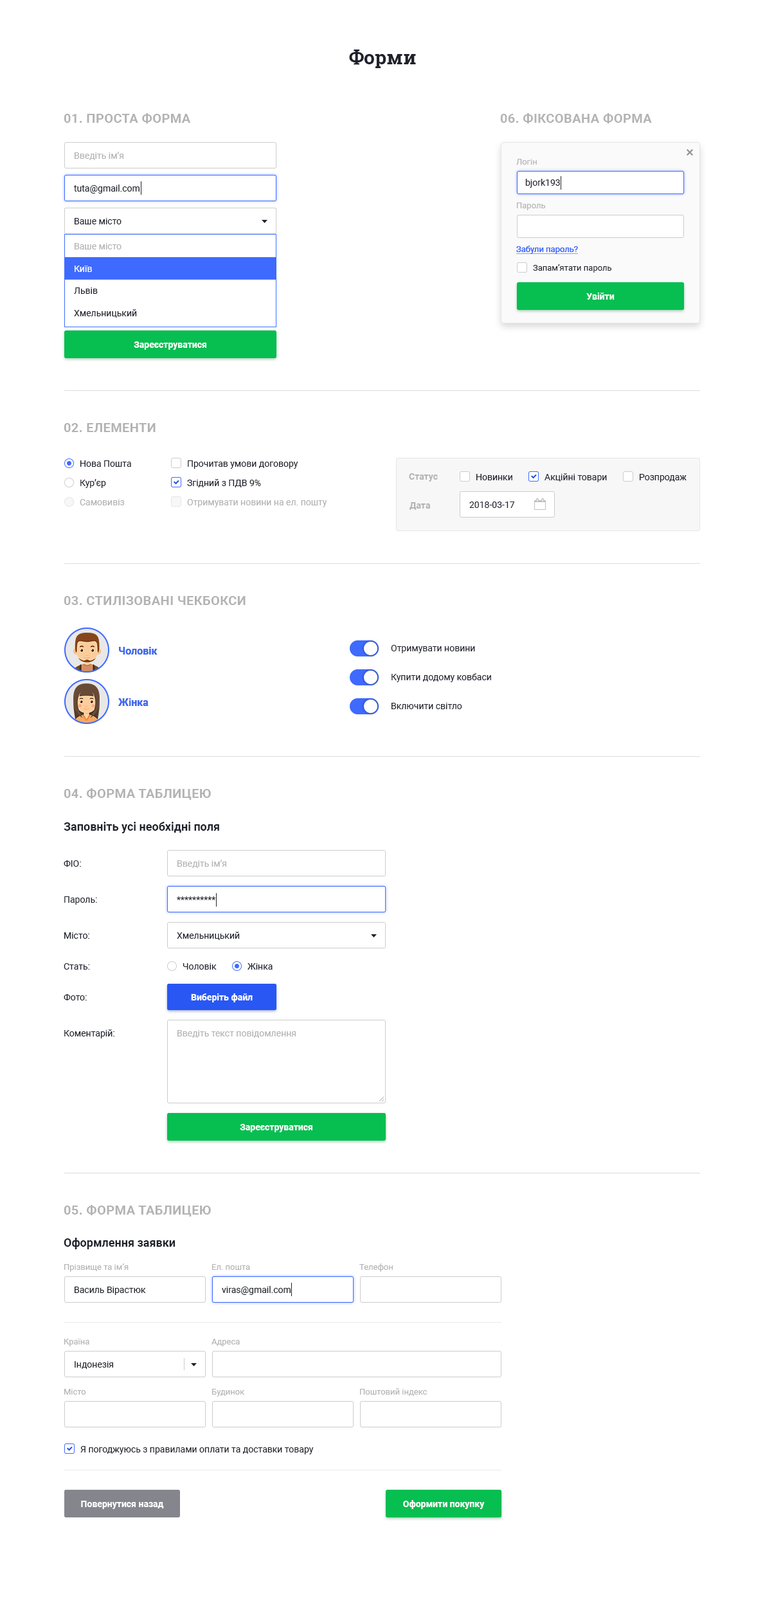
<style>
.page{position:relative;width:765px;height:1610px;background:#ffffff}
.page>*{position:absolute;margin:0}
.t1{font:19.3px "RobotoSlab-Bold";color:#1f222c}
.t2{font:12.9px "Roboto-Bold";letter-spacing:0.02em;color:#b3b3b3;text-transform:uppercase}
.t3{font:9px "Roboto-Regular";color:#b3b3b3}
.t4{font:8.4px "Roboto-Regular";color:#b3b3b3}
.t5{font:9px "Roboto-Regular";color:#1f222c}
.t6{font:9px "Roboto-Regular"}
.t7{font:8.4px "Roboto-Regular";color:#3e6aff}
.t8{font:8.4px "Roboto-Regular";color:#3e6aff;text-decoration:underline}
.t9{font:9px "Roboto-Regular";color:#ffffff}
.t10{font:8.4px "Roboto-Regular";color:#1f222c}
.t11{font:9px "Roboto-Bold";color:#ffffff}
.t12{font:9px "TimesNewRomanPSMT"}
.t13{font:9px "Roboto-Bold";color:#b3b3b3}
.t14{font:10.3px "Roboto-Bold";color:#3e6aff}
.t15{font:11.6px "Roboto-Bold";color:#1f222c}
</style>
<div class="page">
<p class="t1" style="left:349px;top:50px;width:67px;height:18px">Форми</p>
<p class="t2" style="left:64px;top:113px;width:127px;height:10px">01. проста форма</p>
<p class="t2" style="left:500px;top:113px;width:152px;height:10px">06. фіксована форма</p>
<p class="t3" style="left:75px;top:152px;width:48px;height:8px">Введіть ім’я</p>
<p class="t4" style="left:516px;top:159px;width:21px;height:6px">Логін</p>
<p class="t5" style="left:74px;top:184px;width:66px;height:10px">tuta@gmail.com</p>
<p class="t6" style="left:75px;top:184px;width:21px;height:8px">Email</p>
<p class="t5" style="left:525px;top:179px;width:35px;height:9px">bjork193</p>
<p class="t4" style="left:517px;top:203px;width:29px;height:7px">Пароль</p>
<p class="t5" style="left:75px;top:218px;width:47px;height:6px">Ваше місто</p>
<p class="t5" style="left:75px;top:218px;width:47px;height:6px">Ваше місто</p>
<p class="t3" style="left:75px;top:243px;width:47px;height:6px">Ваше місто</p>
<p class="t7" style="left:516px;top:246px;width:62px;height:8px">Забули пароль?</p>
<p class="t8" style="left:516px;top:246px;width:62px;height:8px">Забули пароль?</p>
<p class="t9" style="left:75px;top:266px;width:17px;height:6px">Київ</p>
<p class="t10" style="left:533px;top:264px;width:79px;height:9px">Запам’ятати пароль</p>
<p class="t5" style="left:74px;top:287px;width:24px;height:7px">Львів</p>
<p class="t11" style="left:586px;top:292px;width:29px;height:8px">Увійти</p>
<p class="t11" style="left:586px;top:292px;width:29px;height:8px">Увійти</p>
<p class="t5" style="left:74px;top:309px;width:63px;height:9px">Хмельницький</p>
<p class="t11" style="left:134px;top:341px;width:72px;height:9px">Зареєструватися</p>
<p class="t12" style="left:139px;top:341px;width:63px;height:9px">Зареєструватися</p>
<p class="t2" style="left:64px;top:423px;width:92px;height:9px">02. елементи</p>
<p class="t5" style="left:80px;top:460px;width:51px;height:7px">Нова Пошта</p>
<p class="t5" style="left:188px;top:460px;width:110px;height:9px">Прочитав умови договору</p>
<p class="t13" style="left:409px;top:473px;width:29px;height:9px">Статус</p>
<p class="t5" style="left:476px;top:474px;width:36px;height:6px">Новинки</p>
<p class="t5" style="left:544px;top:473px;width:63px;height:9px">Акційні товари</p>
<p class="t5" style="left:640px;top:474px;width:47px;height:8px">Розпродаж</p>
<p class="t5" style="left:80px;top:479px;width:26px;height:9px">Кур’єр</p>
<p class="t5" style="left:187px;top:479px;width:74px;height:8px">Згідний з ПДВ 9%</p>
<p class="t3" style="left:80px;top:499px;width:44px;height:6px">Самовивіз</p>
<p class="t3" style="left:187px;top:499px;width:140px;height:8px">Отримувати новини на ел. пошту</p>
<p class="t13" style="left:410px;top:502px;width:20px;height:8px">Дата</p>
<p class="t5" style="left:469px;top:501px;width:46px;height:7px">2018-03-17</p>
<p class="t2" style="left:64px;top:596px;width:182px;height:9px">03. стилізовані чекбокси</p>
<p class="t14" style="left:119px;top:647px;width:39px;height:7px">Чоловік</p>
<p class="t14" style="left:119px;top:647px;width:39px;height:7px">Чоловік</p>
<p class="t5" style="left:391px;top:645px;width:84px;height:8px">Отримувати новини</p>
<p class="t5" style="left:392px;top:673px;width:99px;height:9px">Купити додому ковбаси</p>
<p class="t14" style="left:118px;top:698px;width:30px;height:8px">Жінка</p>
<p class="t14" style="left:118px;top:698px;width:30px;height:8px">Жінка</p>
<p class="t5" style="left:392px;top:703px;width:70px;height:6px">Включити світло</p>
<p class="t2" style="left:64px;top:788px;width:147px;height:12px">04. форма таблицею</p>
<p class="t15" style="left:64px;top:822px;width:155px;height:11px">Заповніть усі необхідні поля</p>
<p class="t5" style="left:64px;top:860px;width:17px;height:7px">ФІО:</p>
<p class="t3" style="left:177px;top:860px;width:49px;height:8px">Введіть ім’я</p>
<p class="t5" style="left:64px;top:896px;width:33px;height:9px">Пароль:</p>
<p class="t5" style="left:177px;top:896px;width:39px;height:4px">**********</p>
<p class="t5" style="left:64px;top:932px;width:25px;height:7px">Місто:</p>
<p class="t5" style="left:177px;top:932px;width:63px;height:8px">Хмельницький</p>
<p class="t5" style="left:64px;top:963px;width:26px;height:6px">Стать:</p>
<p class="t5" style="left:183px;top:963px;width:34px;height:6px">Чоловік</p>
<p class="t5" style="left:248px;top:963px;width:25px;height:6px">Жінка</p>
<p class="t5" style="left:64px;top:994px;width:23px;height:6px">Фото:</p>
<p class="t11" style="left:191px;top:993px;width:62px;height:9px">Виберіть файл</p>
<p class="t11" style="left:191px;top:993px;width:62px;height:9px">Виберіть файл</p>
<p class="t5" style="left:64px;top:1029px;width:50px;height:9px">Коментарій:</p>
<p class="t3" style="left:177px;top:1030px;width:119px;height:8px">Введіть текст повідомлення</p>
<p class="t11" style="left:240px;top:1124px;width:72px;height:8px">Зареєструватися</p>
<p class="t11" style="left:240px;top:1124px;width:72px;height:8px">Зареєструватися</p>
<p class="t2" style="left:64px;top:1205px;width:147px;height:11px">05. форма таблицею</p>
<p class="t15" style="left:64px;top:1238px;width:111px;height:11px">Оформлення заявки</p>
<p class="t4" style="left:64px;top:1263px;width:65px;height:9px">Прізвище та ім’я</p>
<p class="t4" style="left:212px;top:1264px;width:38px;height:6px">Ел. пошта</p>
<p class="t4" style="left:359px;top:1263px;width:34px;height:9px">Телефон</p>
<p class="t5" style="left:75px;top:1286px;width:71px;height:9px">Василь Вірастюк</p>
<p class="t5" style="left:222px;top:1286px;width:69px;height:9px">viras@gmail.com</p>
<p class="t4" style="left:64px;top:1338px;width:25px;height:8px">Країна</p>
<p class="t4" style="left:212px;top:1338px;width:28px;height:8px">Адреса</p>
<p class="t5" style="left:75px;top:1361px;width:38px;height:8px">Індонезія</p>
<p class="t4" style="left:64px;top:1389px;width:22px;height:5px">Місто</p>
<p class="t4" style="left:212px;top:1389px;width:33px;height:7px">Будинок</p>
<p class="t4" style="left:360px;top:1388px;width:67px;height:8px">Поштовий індекс</p>
<p class="t5" style="left:80px;top:1446px;width:234px;height:8px">Я погоджуюсь з правилами оплати та доставки товару</p>
<p class="t11" style="left:81px;top:1500px;width:83px;height:9px">Повернутися назад</p>
<p class="t11" style="left:81px;top:1500px;width:83px;height:9px">Повернутися назад</p>
<p class="t11" style="left:403px;top:1500px;width:82px;height:9px">Оформити покупку</p>
<p class="t11" style="left:403px;top:1500px;width:82px;height:9px">Оформити покупку</p>
</div>
